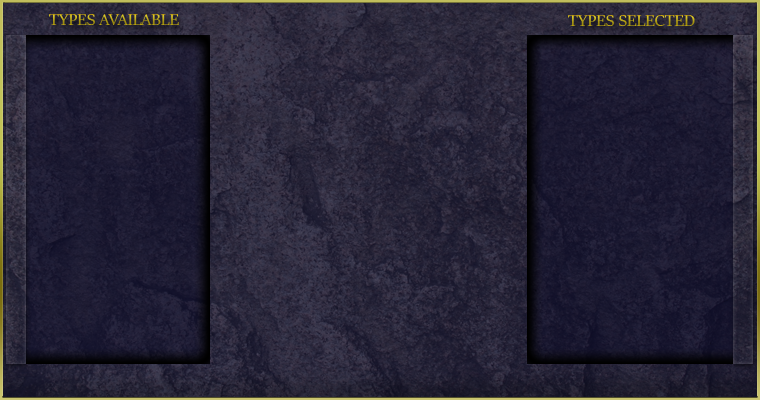
<style>
.page{position:relative;width:760px;height:400px}
.page>*{position:absolute;margin:0}
.t1{font:18px "SitkaBanner"}
</style>
<div class="page">
<p class="t1" style="left:49px;top:14px;width:130px;height:11px">TYPES AVAILABLE</p>
<p class="t1" style="left:568px;top:15px;width:127px;height:11px">TYPES SELECTED</p>
</div>
